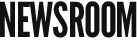
<style>
.page{position:relative;width:137px;height:40px;background:#111111}
.page>*{position:absolute;margin:0}
.t1{font:48px "LeagueGothic";letter-spacing:-0.025em;color:#111111}
</style>
<div class="page">
<p class="t1" style="left:0px;top:1px;width:137px;height:37px">NEWSROOM</p>
</div>
